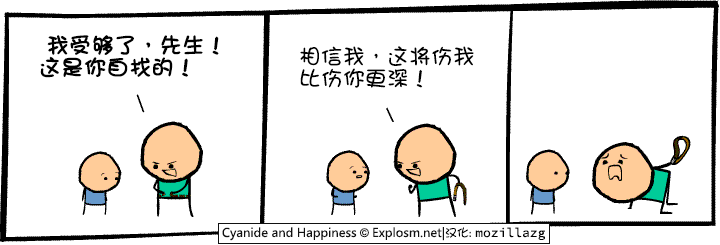
<style>
.page{position:relative;width:720px;height:245px;background:#ffffff}
.page>*{position:absolute;margin:0}
.t1{font:22px/22px "DFGirl";color:#000000;font-weight:bold}
.t2{font:22px/22px "DFGirl";color:#000000}
</style>
<div class="page">
<p class="t1" style="left:40px;top:35px;width:179px;height:43px">我受够了，先生！<br>这是你自找的！</p>
<p class="t2" style="left:300px;top:46px;width:174px;height:42px">相信我，这将伤我<br>比伤你更深！</p>
</div>
